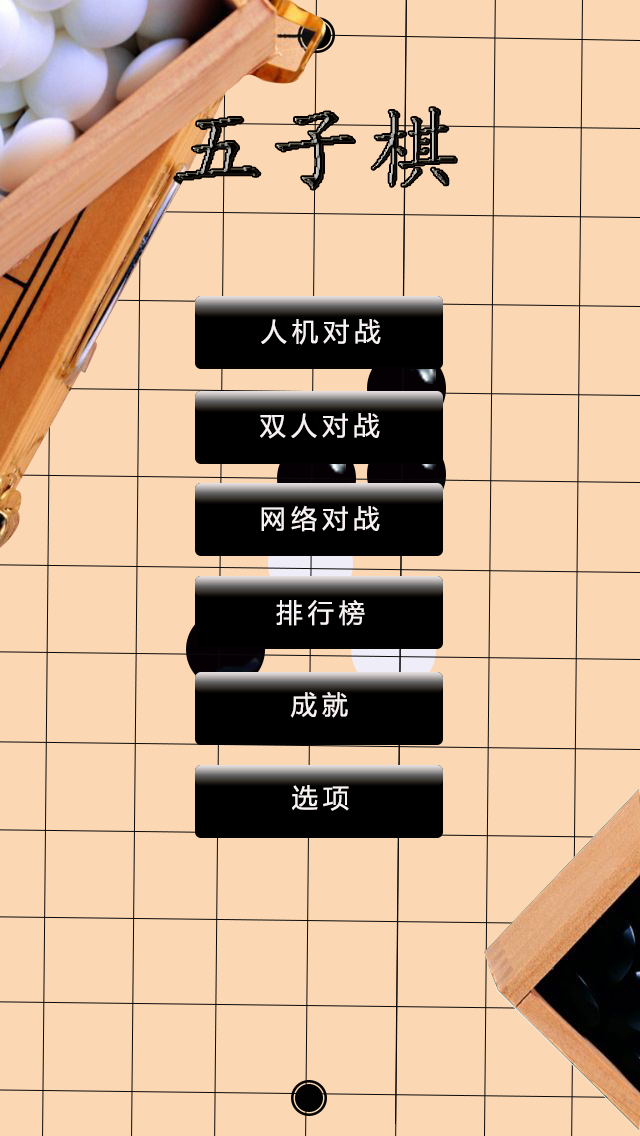
<style>
.page{position:relative;width:640px;height:1136px;background:#fbd7b3}
.page>*{position:absolute;margin:0}
.t1{font:90px "¿¬Ìå";letter-spacing:0.1em}
.t2{font:26px "MicrosoftYaHei";letter-spacing:0.2em;color:#f7f1f1}
</style>
<div class="page">
<p class="t1" style="left:177px;top:108px;width:279px;height:81px">五子棋</p>
<p class="t2" style="left:261px;top:319px;width:120px;height:26px">人机对战</p>
<p class="t2" style="left:260px;top:413px;width:120px;height:26px">双人对战</p>
<p class="t2" style="left:261px;top:505px;width:119px;height:27px">网络对战</p>
<p class="t2" style="left:276px;top:600px;width:89px;height:26px">排行榜</p>
<p class="t2" style="left:290px;top:691px;width:58px;height:27px">成就</p>
<p class="t2" style="left:292px;top:785px;width:57px;height:26px">选项</p>
</div>
